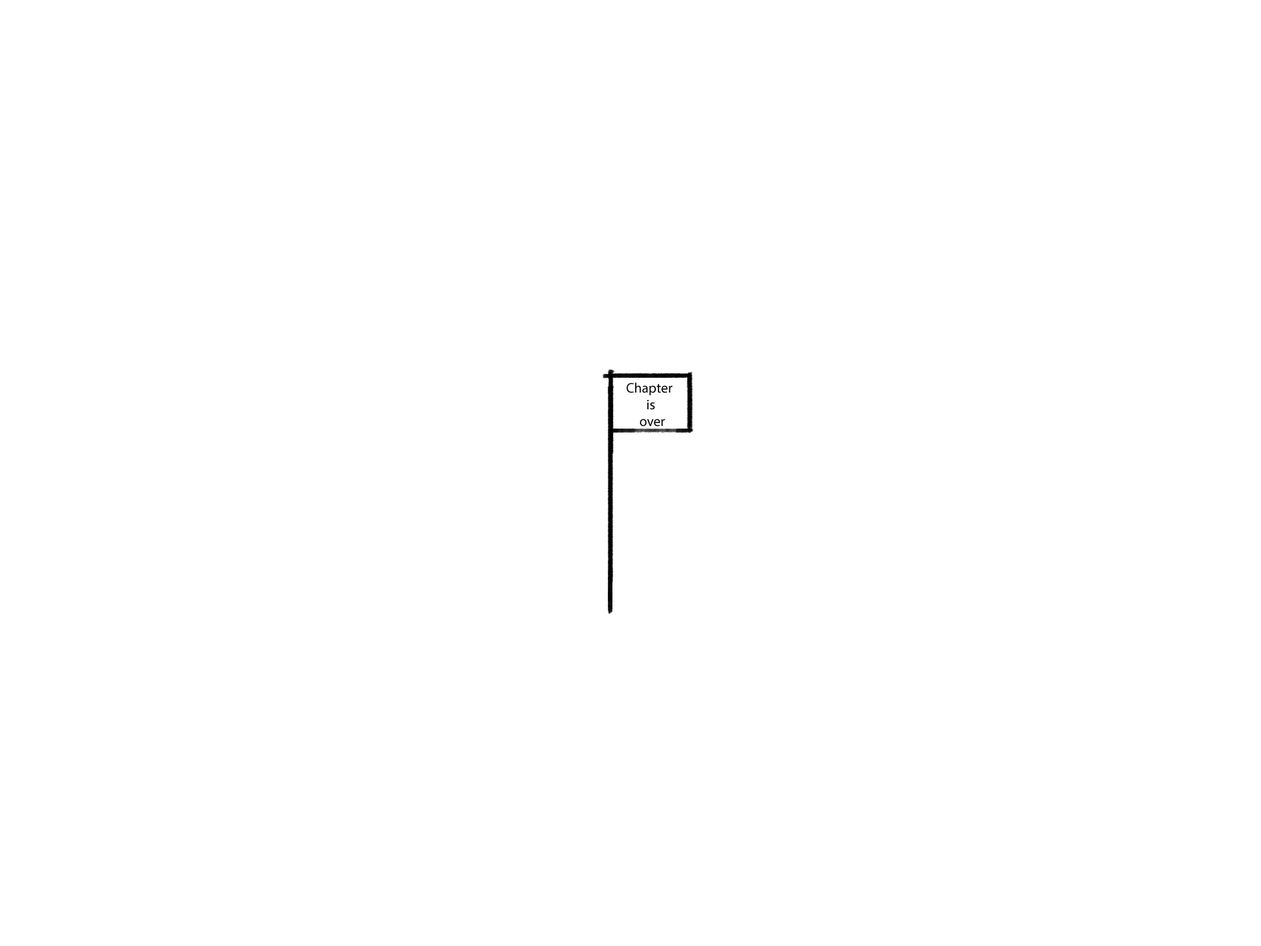
<style>
.page{position:relative;width:1261px;height:946px;background:#ffffff}
.page>*{position:absolute;margin:0}
.t1{font:13.9px "MyriadPro-Regular";color:#000000}
</style>
<div class="page">
<p class="t1" style="left:627px;top:382px;width:46px;height:44px;text-align:center">Chapter <br>is<br> over</p>
</div>
